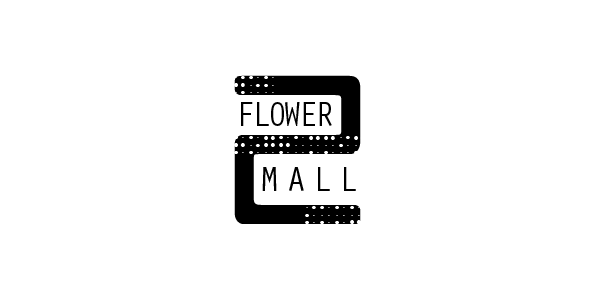
<style>
.page{position:relative;width:600px;height:300px;background:#ffffff}
.page>*{position:absolute;margin:0}
.t1{font:209px "OrbitBbyBT-Regular";color:#000000}
.t2{font:35px "OratorStd";letter-spacing:-0.15em;color:#000000}
.t3{font:35px "OratorStd";letter-spacing:0.15em;color:#000000}
</style>
<div class="page">
<p class="t1" style="left:234px;top:75px;width:127px;height:149px">2</p>
<p class="t2" style="left:241px;top:102px;width:91px;height:24px">FLOWER</p>
<p class="t3" style="left:262px;top:167px;width:94px;height:24px">MALL</p>
</div>
